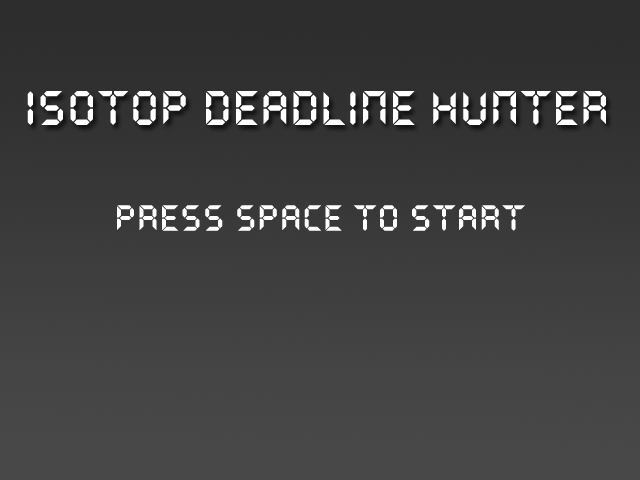
<style>
.page{position:relative;width:640px;height:480px}
.page>*{position:absolute;margin:0}
.t1{font:48px "QuartzMS";color:#ffffff}
.t2{font:36px "QuartzMS";color:#ffffff}
</style>
<div class="page">
<p class="t1" style="left:27px;top:91px;width:579px;height:34px">ISOTOP DEADLINE HUNTER</p>
<p class="t2" style="left:117px;top:205px;width:408px;height:26px">PRESS SPACE TO START</p>
</div>
